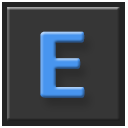
<style>
.page{position:relative;width:128px;height:128px;background:#363636}
.page>*{position:absolute;margin:0}
.t1{font:104px "Calibri-Bold";color:#4895ef;scale:1.12 1}
</style>
<div class="page">
<p class="t1" style="left:40px;top:31px;width:45px;height:67px">E</p>
</div>
